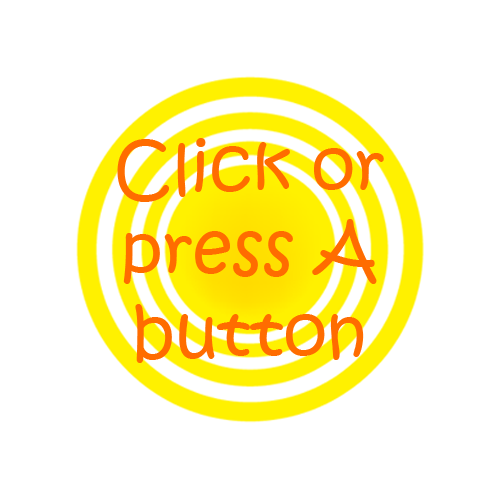
<style>
.page{position:relative;width:500px;height:500px;background:#ffffff}
.page>*{position:absolute;margin:0}
.t1{font:69.2px "KristenITC-Regular";color:#ff6c00}
</style>
<div class="page">
<p class="t1" style="left:117px;top:138px;width:267px;height:225px;text-align:center">Click or<br>press A<br>button</p>
</div>
